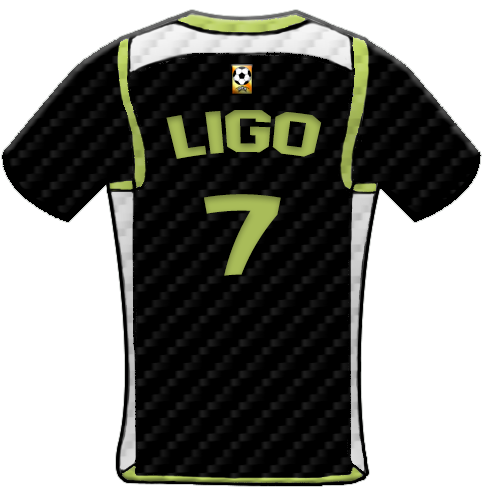
<style>
.page{position:relative;width:482px;height:494px;background:#ffffff}
.page>*{position:absolute;margin:0}
.t1{font:59.4px "AdidasHalfBlock2016";color:#a9bc59;scale:1.13 1}
.t2{font:113.8px "AdidasHalfBlock2016";color:#a9bc59}
</style>
<div class="page">
<p class="t1" style="left:166px;top:110px;width:156px;height:49px">Ligo</p>
<p class="t2" style="left:204px;top:194px;width:77px;height:82px">7</p>
</div>
